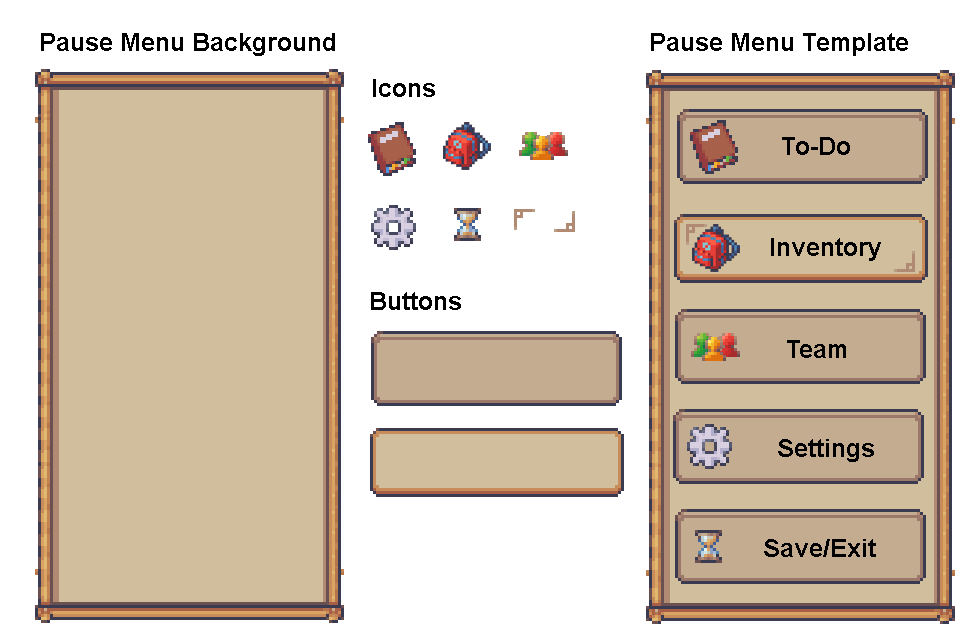
<style>
.page{position:relative;width:972px;height:644px;background:#ffffff}
.page>*{position:absolute;margin:0}
.t1{font:25px "Arial-BoldMT";color:#000000}
</style>
<div class="page">
<p class="t1" style="left:41px;top:33px;width:294px;height:23px">Pause Menu Background</p>
<p class="t1" style="left:651px;top:33px;width:257px;height:23px">Pause Menu Template</p>
<p class="t1" style="left:373px;top:79px;width:62px;height:18px">Icons</p>
<p class="t1" style="left:782px;top:137px;width:68px;height:18px">To-Do</p>
<p class="t1" style="left:771px;top:238px;width:110px;height:23px">Inventory</p>
<p class="t1" style="left:371px;top:292px;width:90px;height:18px">Buttons</p>
<p class="t1" style="left:787px;top:340px;width:59px;height:18px">Team</p>
<p class="t1" style="left:778px;top:439px;width:96px;height:23px">Settings</p>
<p class="t1" style="left:764px;top:539px;width:112px;height:18px">Save/Exit</p>
</div>
